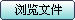
<style>
.page{position:relative;width:75px;height:20px}
.page>*{position:absolute;margin:0}
.t1{font:12px "SimSun";color:#000000}
</style>
<div class="page">
<p class="t1" style="left:15px;top:4px;width:47px;height:11px">浏览文件</p>
</div>
